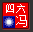
<style>
.page{position:relative;width:33px;height:32px;background:#f20000}
.page>*{position:absolute;margin:0}
.t1{font:10.4px "SimSun";color:#ffffff}
.t2{font:11.7px "SimSun";color:#ffffff}
</style>
<div class="page">
<p class="t1" style="left:6px;top:4px;width:19px;height:9px">四六</p>
<p class="t2" style="left:16px;top:15px;width:11px;height:12px">冯</p>
</div>
